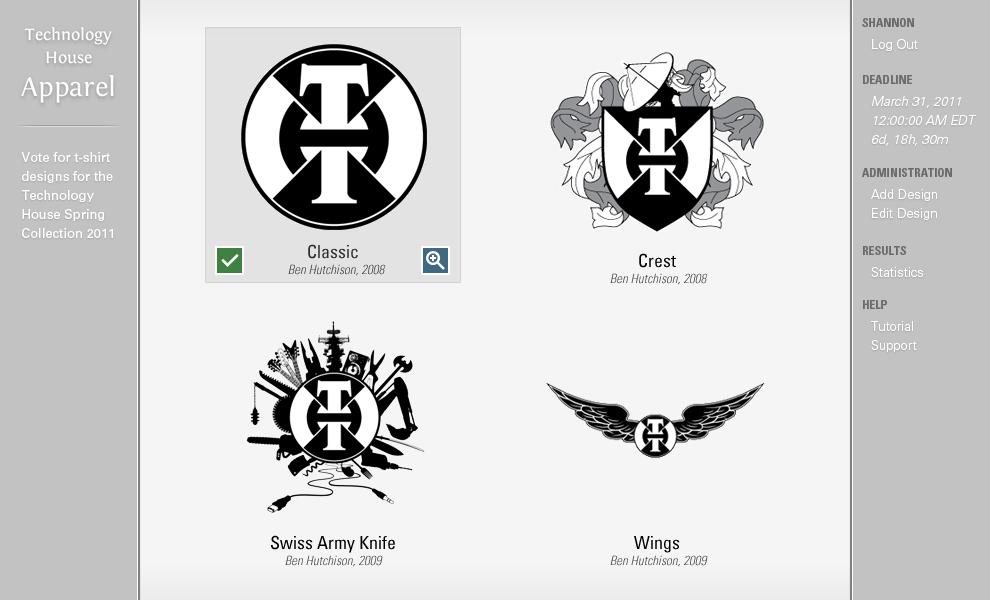
<style>
.page{position:relative;width:990px;height:600px;background:#f5f5f5}
.page>*{position:absolute;margin:0}
.t1{font:17px "Fontin-Regular";color:#ffffff}
.t2{font:17px/23px "Fontin-Regular";color:#ffffff}
.t3{font:28px/33px "Fontin-Regular";color:#ffffff}
.t4{font:12px "UniversLTStd-BoldCn";color:#6b6b6b;text-transform:uppercase}
.t5{font:13px "UniversLTStd-Light";color:#ffffff}
.t6{font:13px/19px "UniversLTStd-LightObl";color:#ffffff}
.t7{font:13px/19px "UniversLTStd";color:#ffffff}
.t8{font:13px/19px "UniversLTStd-Light";color:#ffffff}
.t9{font:18px "UniversLTStd-Cn";color:#2b2b2b}
.t10{font:18px "UniversLTStd-Cn";color:#000000}
.t11{font:13px "UniversLTStd-LightCnObl"}
</style>
<div class="page">
<p class="t1" style="left:21px;top:27px;width:93px;height:76px;text-align:center">Technology<br><span class="t2">House<br></span><span class="t3">Apparel</span></p>
<p class="t4" style="left:862px;top:18px;width:52px;height:9px">Shannon</p>
<p class="t5" style="left:872px;top:39px;width:46px;height:12px">Log Out</p>
<p class="t4" style="left:863px;top:75px;width:49px;height:9px">Deadline</p>
<p class="t6" style="left:872px;top:96px;width:105px;height:50px">March 31, 2011<br>12:00:00 AM EDT<br>6d, 18h, 30m</p>
<p class="t7" style="left:21px;top:152px;width:92px;height:86px">Vote for t-shirt designs for the Technology House Spring Collection 2011</p>
<p class="t4" style="left:862px;top:168px;width:90px;height:9px">Administration</p>
<p class="t8" style="left:871px;top:189px;width:66px;height:31px">Add Design<br>Edit Design</p>
<p class="t9" style="left:308px;top:244px;width:50px;height:15px">Classic</p>
<p class="t4" style="left:863px;top:246px;width:43px;height:9px">Results</p>
<p class="t10" style="left:639px;top:253px;width:37px;height:15px">Crest</p>
<p class="t11" style="left:288px;top:264px;width:98px;height:12px">Ben Hutchison, 2008</p>
<p class="t5" style="left:871px;top:267px;width:53px;height:10px">Statistics</p>
<p class="t11" style="left:610px;top:273px;width:98px;height:12px">Ben Hutchison, 2008</p>
<p class="t4" style="left:863px;top:300px;width:24px;height:9px">Help</p>
<p class="t8" style="left:871px;top:321px;width:46px;height:31px">Tutorial<br>Support</p>
<p class="t10" style="left:271px;top:535px;width:124px;height:18px">Swiss Army Knife</p>
<p class="t10" style="left:634px;top:536px;width:46px;height:17px">Wings</p>
<p class="t11" style="left:285px;top:555px;width:98px;height:12px">Ben Hutchison, 2009</p>
<p class="t11" style="left:610px;top:555px;width:98px;height:12px">Ben Hutchison, 2009</p>
</div>
